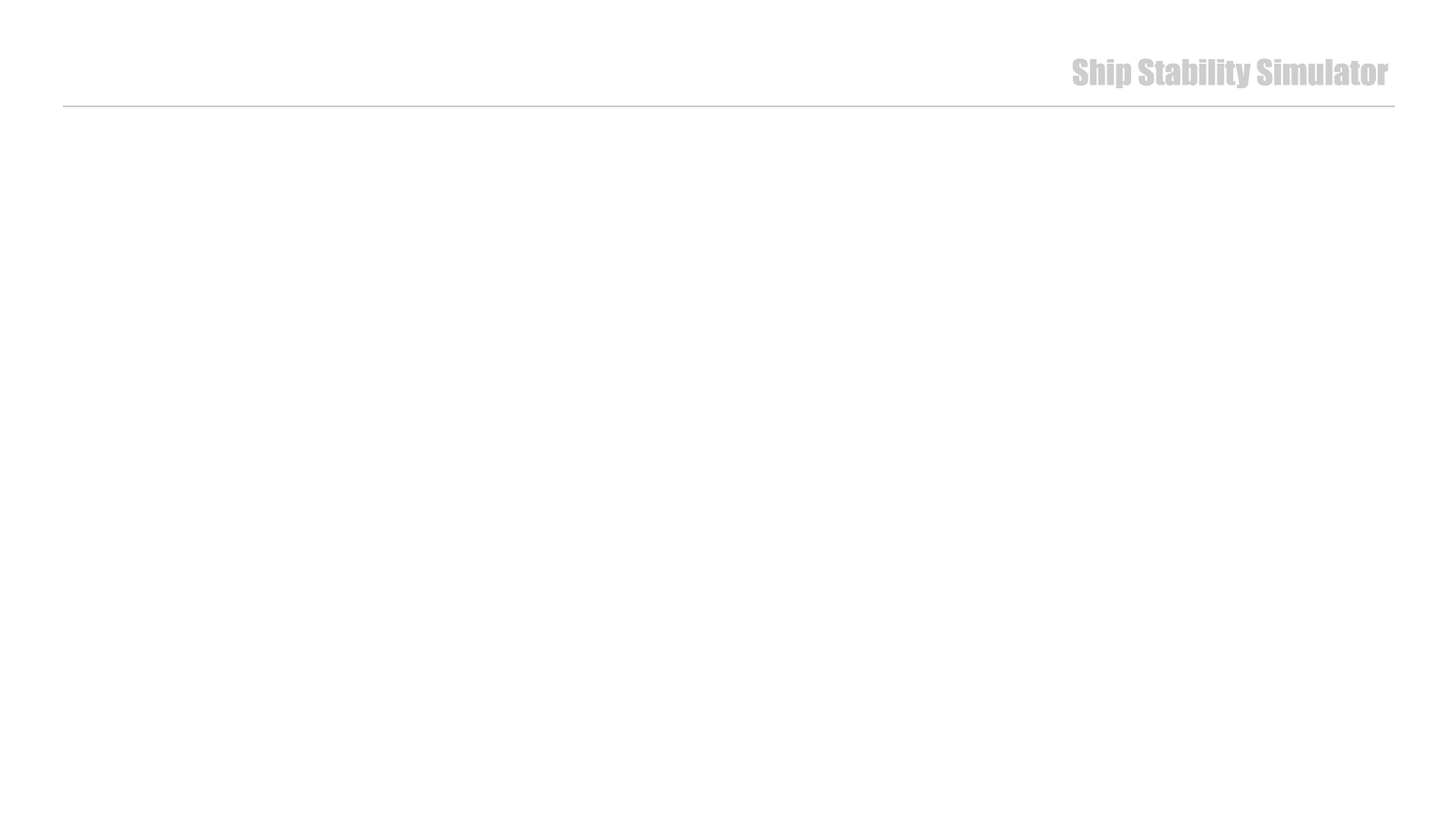
<style>
.page{position:relative;width:1456px;height:819px;background:#ffffff}
.page>*{position:absolute;margin:0}
.t1{font:32.8px "Impact";color:#cdcdcd}
</style>
<div class="page">
<p class="t1" style="left:1072px;top:58px;width:317px;height:30px">Ship Stability Simulator</p>
</div>
